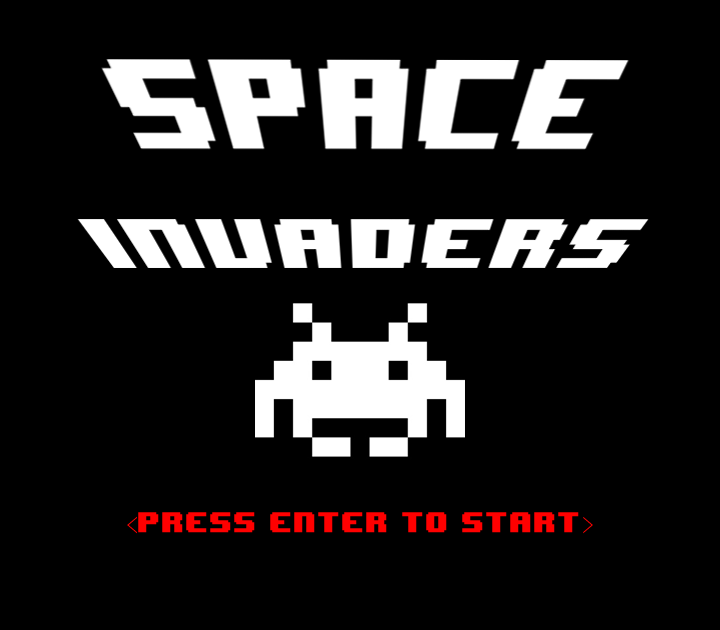
<style>
.page{position:relative;width:720px;height:630px;background:#000000}
.page>*{position:absolute;margin:0}
.t1{font:24px "8BITWONDERNominal";color:#ff0000}
.t2{font:24px "DFKaiShu-SB-Estd-BF";color:#ff0000}
</style>
<div class="page">
<p class="t1" style="left:127px;top:512px;width:466px;height:22px"><span class="t2">&lt;</span>PRESS ENTER TO START<span class="t2">&gt;</span></p>
</div>
